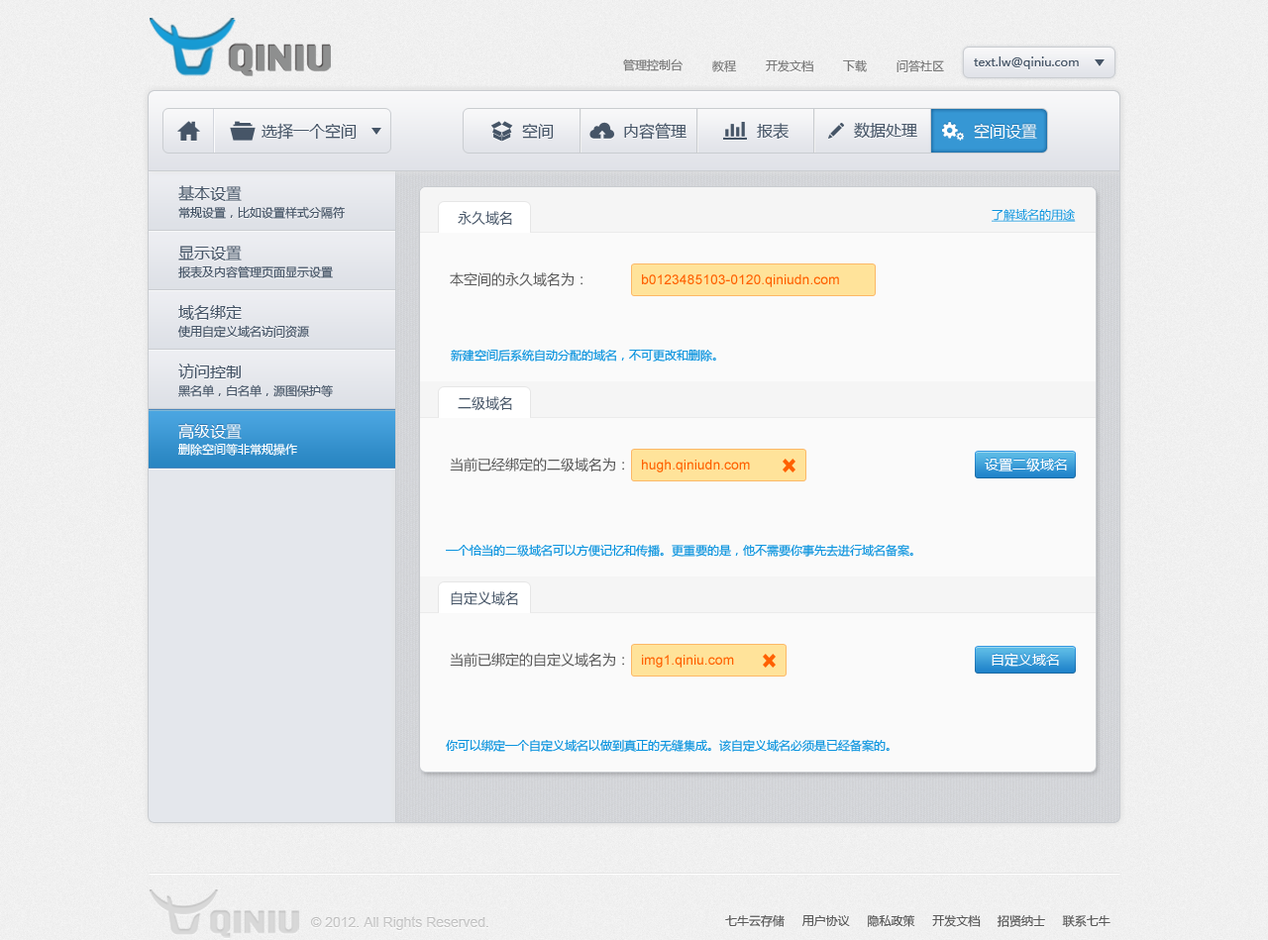
<style>
.page{position:relative;width:1268px;height:940px;background:#fafafa}
.page>*{position:absolute;margin:0}
.t1{font:11.9px "MicrosoftYaHei";color:#787878}
.t2{font:11.9px "MicrosoftYaHei";color:#465567}
.t3{font:15.9px "MicrosoftYaHei";color:#465567}
.t4{font:15.9px "MicrosoftYaHei";color:#ffffff}
.t5{font:11.9px "MicrosoftYaHei";color:#0c94de;text-decoration:underline}
.t6{font:13.9px "MicrosoftYaHei";color:#465567}
.t7{font:13.9px "MicrosoftYaHei";color:#585858}
.t8{font:13.9px "ArialMT";color:#ff6000}
.t9{font:11.9px "MicrosoftYaHei";color:#0c94de}
.t10{font:11.9px "MicrosoftYaHei";color:#ffffff}
.t11{font:13.9px "MicrosoftYaHei";color:#ffffff}
.t12{font:13.9px "ArialMT";color:#c6c6c6}
.t13{font:11.9px "MicrosoftYaHei";color:#585858}
</style>
<div class="page">
<p class="t1" style="left:623px;top:58px;width:60px;height:13px">管理控制台</p>
<p class="t1" style="left:712px;top:60px;width:25px;height:12px">教程</p>
<p class="t1" style="left:766px;top:59px;width:47px;height:13px">开发文档</p>
<p class="t1" style="left:843px;top:59px;width:24px;height:13px">下载</p>
<p class="t1" style="left:897px;top:59px;width:47px;height:13px">问答社区</p>
<p class="t2" style="left:974px;top:56px;width:105px;height:13px">text.lw@qiniu.com</p>
<p class="t3" style="left:262px;top:123px;width:95px;height:17px">选择一个空间</p>
<p class="t3" style="left:522px;top:123px;width:32px;height:16px">空间</p>
<p class="t3" style="left:624px;top:123px;width:63px;height:17px">内容管理</p>
<p class="t3" style="left:757px;top:123px;width:32px;height:17px">报表</p>
<p class="t3" style="left:854px;top:122px;width:63px;height:17px">数据处理</p>
<p class="t4" style="left:974px;top:123px;width:63px;height:16px">空间设置</p>
<p class="t3" style="left:178px;top:185px;width:64px;height:16px">基本设置</p>
<p class="t2" style="left:178px;top:206px;width:167px;height:13px">常规设置，比如设置样式分隔符</p>
<p class="t5" style="left:992px;top:209px;width:84px;height:13px">了解域名的用途</p>
<p class="t6" style="left:458px;top:211px;width:54px;height:14px">永久域名</p>
<p class="t3" style="left:178px;top:246px;width:64px;height:15px">显示设置</p>
<p class="t2" style="left:178px;top:266px;width:155px;height:12px">报表及内容管理页面显示设置</p>
<p class="t7" style="left:450px;top:272px;width:133px;height:14px">本空间的永久域名为：</p>
<p class="t8" style="left:642px;top:274px;width:197px;height:13px">b0123485103-0120.qiniudn.com</p>
<p class="t3" style="left:178px;top:305px;width:64px;height:15px">域名绑定</p>
<p class="t2" style="left:177px;top:325px;width:132px;height:13px">使用自定义域名访问资源</p>
<p class="t9" style="left:451px;top:349px;width:265px;height:13px">新建空间后系统自动分配的域名，不可更改和删除。</p>
<p class="t3" style="left:178px;top:364px;width:63px;height:15px">访问控制</p>
<p class="t2" style="left:178px;top:384px;width:155px;height:13px">黑名单，白名单，源图保护等</p>
<p class="t6" style="left:458px;top:396px;width:54px;height:14px">二级域名</p>
<p class="t4" style="left:178px;top:423px;width:64px;height:16px">高级设置</p>
<p class="t10" style="left:178px;top:443px;width:119px;height:13px">删除空间等非常规操作</p>
<p class="t7" style="left:450px;top:458px;width:174px;height:14px">当前已经绑定的二级域名为：</p>
<p class="t8" style="left:642px;top:460px;width:108px;height:13px">hugh.qiniudn.com</p>
<p class="t11" style="left:985px;top:458px;width:82px;height:14px">设置二级域名</p>
<p class="t9" style="left:446px;top:544px;width:468px;height:13px">一个恰当的二级域名可以方便记忆和传播。更重要的是，他不需要你事先去进行域名备案。</p>
<p class="t6" style="left:451px;top:591px;width:67px;height:14px">自定义域名</p>
<p class="t7" style="left:450px;top:653px;width:174px;height:14px">当前已绑定的自定义域名为：</p>
<p class="t11" style="left:992px;top:653px;width:67px;height:14px">自定义域名</p>
<p class="t8" style="left:642px;top:655px;width:92px;height:13px">img1.qiniu.com</p>
<p class="t9" style="left:446px;top:739px;width:444px;height:13px">你可以绑定一个自定义域名以做到真正的无缝集成。该自定义域名必须是已经备案的。</p>
<p class="t12" style="left:310px;top:916px;width:178px;height:14px">© 2012. All Rights Reserved.</p>
<p class="t13" style="left:725px;top:914px;width:386px;height:13px">七牛云存储     用户协议     隐私政策     开发文档     招贤纳士     联系七牛</p>
</div>
